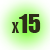
<style>
.page{position:relative;width:50px;height:50px}
.page>*{position:absolute;margin:0}
.t1{font:24px "Impact";color:#2d2c19}
.t2{font:14px "Impact";color:#2d2c19}
</style>
<div class="page">
<p class="t1" style="left:11px;top:14px;width:30px;height:19px"><span class="t2">X</span>15</p>
</div>
